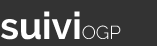
<style>
.page{position:relative;width:157px;height:46px;background:#333333}
.page>*{position:absolute;margin:0}
.t1{font:37.5px "Raleway-Bold";color:#ffffff}
.t2{font:18.8px "Raleway-Light";color:#ffffff}
</style>
<div class="page">
<p class="t1" style="left:1px;top:11px;width:79px;height:29px">suivi</p>
<p class="t2" style="left:82px;top:25px;width:39px;height:14px">OGP</p>
</div>
